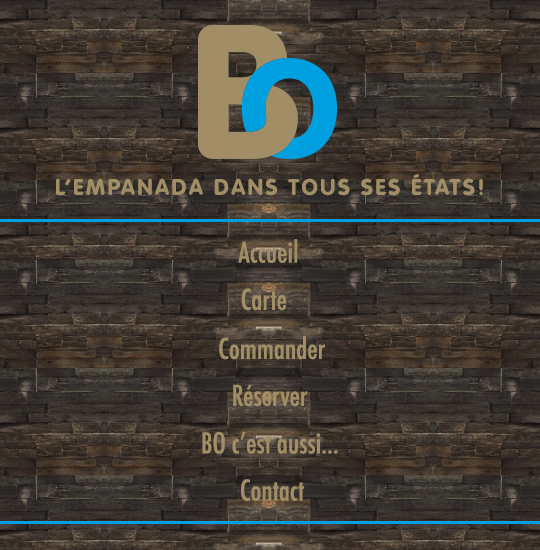
<style>
.page{position:relative;width:540px;height:550px}
.page>*{position:absolute;margin:0}
.t1{font:22px "VAGRoundedStd-Bold";letter-spacing:0.12em;color:#a18e67;text-transform:uppercase}
.t2{font:28px "Futura-CondensedMedium";color:#a18e67}
</style>
<div class="page">
<p class="t1" style="left:56px;top:174px;width:427px;height:22px">L’empanada dans tous ses états!</p>
<p class="t2" style="left:238px;top:239px;width:60px;height:24px">Accueil</p>
<p class="t2" style="left:241px;top:288px;width:46px;height:23px">Carte</p>
<p class="t2" style="left:219px;top:335px;width:106px;height:25px">Commander</p>
<p class="t2" style="left:233px;top:384px;width:75px;height:23px">Réserver</p>
<p class="t2" style="left:202px;top:431px;width:136px;height:23px">BO c’est aussi...</p>
<p class="t2" style="left:241px;top:479px;width:63px;height:22px">Contact</p>
</div>
